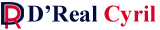
<style>
.page{position:relative;width:160px;height:30px;background:#ffffff}
.page>*{position:absolute;margin:0}
.t1{font:23.6px "TimesNewRomanPS-BoldMT";color:#000c3d}
.t2{font:23.6px "TimesNewRomanPS-BoldMT";color:#db0124}
</style>
<div class="page">
<p class="t1" style="left:27px;top:5px;width:129px;height:22px">D’Real <span class="t2">Cyril</span></p>
</div>
